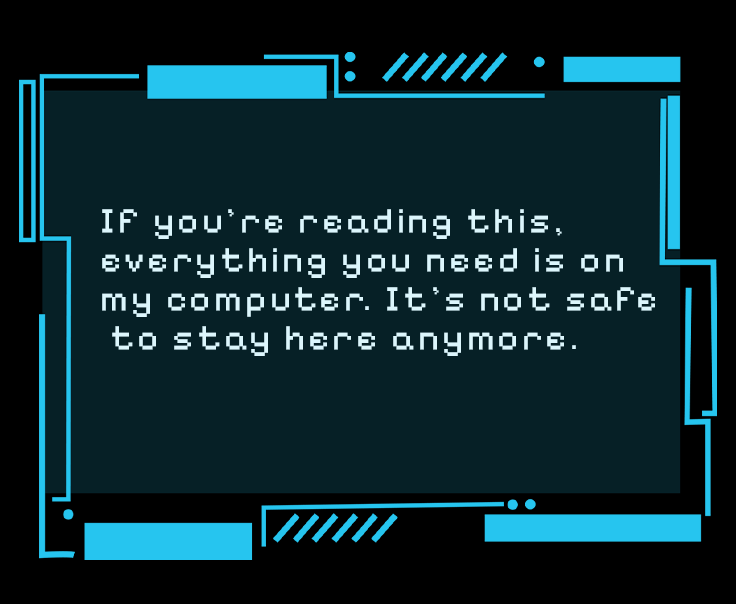
<style>
.page{position:relative;width:736px;height:604px;background:#062026}
.page>*{position:absolute;margin:0}
.t1{font:36px/39.1px "PixelifySans-Regular";letter-spacing:0.095em;color:#dcf6fc;font-weight:bold}
</style>
<div class="page">
<p class="t1" style="left:102px;top:209px;width:553px;height:147px">If you’re reading this, <br>everything you need is on <br>my computer. It’s not safe<br> to stay here anymore.</p>
</div>
